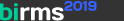
<style>
.page{position:relative;width:124px;height:21px;background:#333333}
.page>*{position:absolute;margin:0}
.t1{font:24px "Days";color:#ffffff;scale:0.9 1}
.t2{font:24px "Days";color:#00cc99;scale:0.9 1}
.t3{font:14px "Days";color:#3761fe;scale:0.9 1}
</style>
<div class="page">
<p class="t1" style="left:0px;top:3px;width:64px;height:18px"><span class="t2">bi</span>rms</p>
<p class="t3" style="left:64px;top:1px;width:33px;height:10px">2019</p>
</div>
